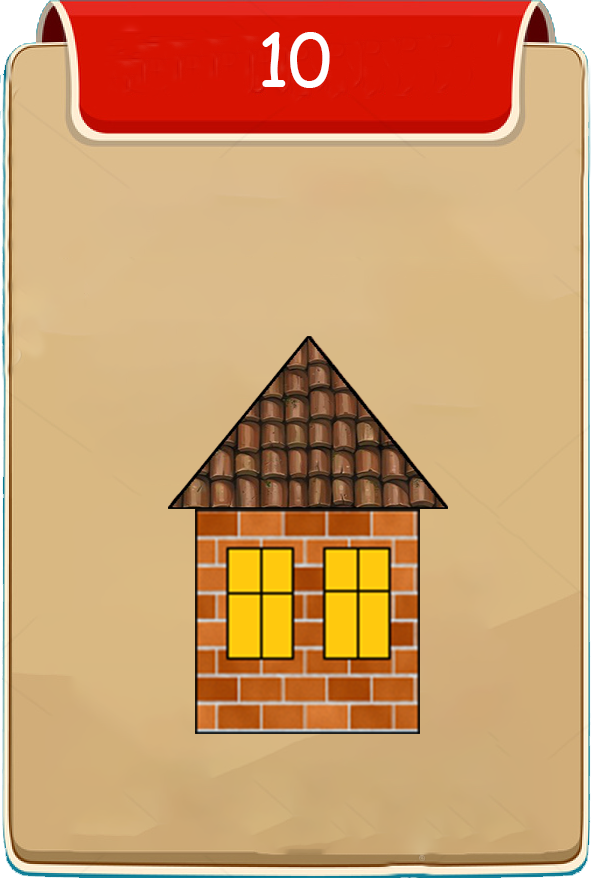
<style>
.page{position:relative;width:591px;height:878px}
.page>*{position:absolute;margin:0}
.t1{font:72px "ComicSansMS";letter-spacing:-0.02em;color:#ffffff}
</style>
<div class="page">
<p class="t1" style="left:262px;top:32px;width:68px;height:56px">10</p>
</div>
